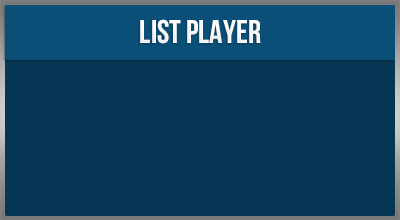
<style>
.page{position:relative;width:400px;height:220px;background:#053754}
.page>*{position:absolute;margin:0}
.t1{font:32.8px "UTM-Bebas";color:#ffffff}
</style>
<div class="page">
<p class="t1" style="left:140px;top:19px;width:121px;height:25px">list player</p>
</div>
